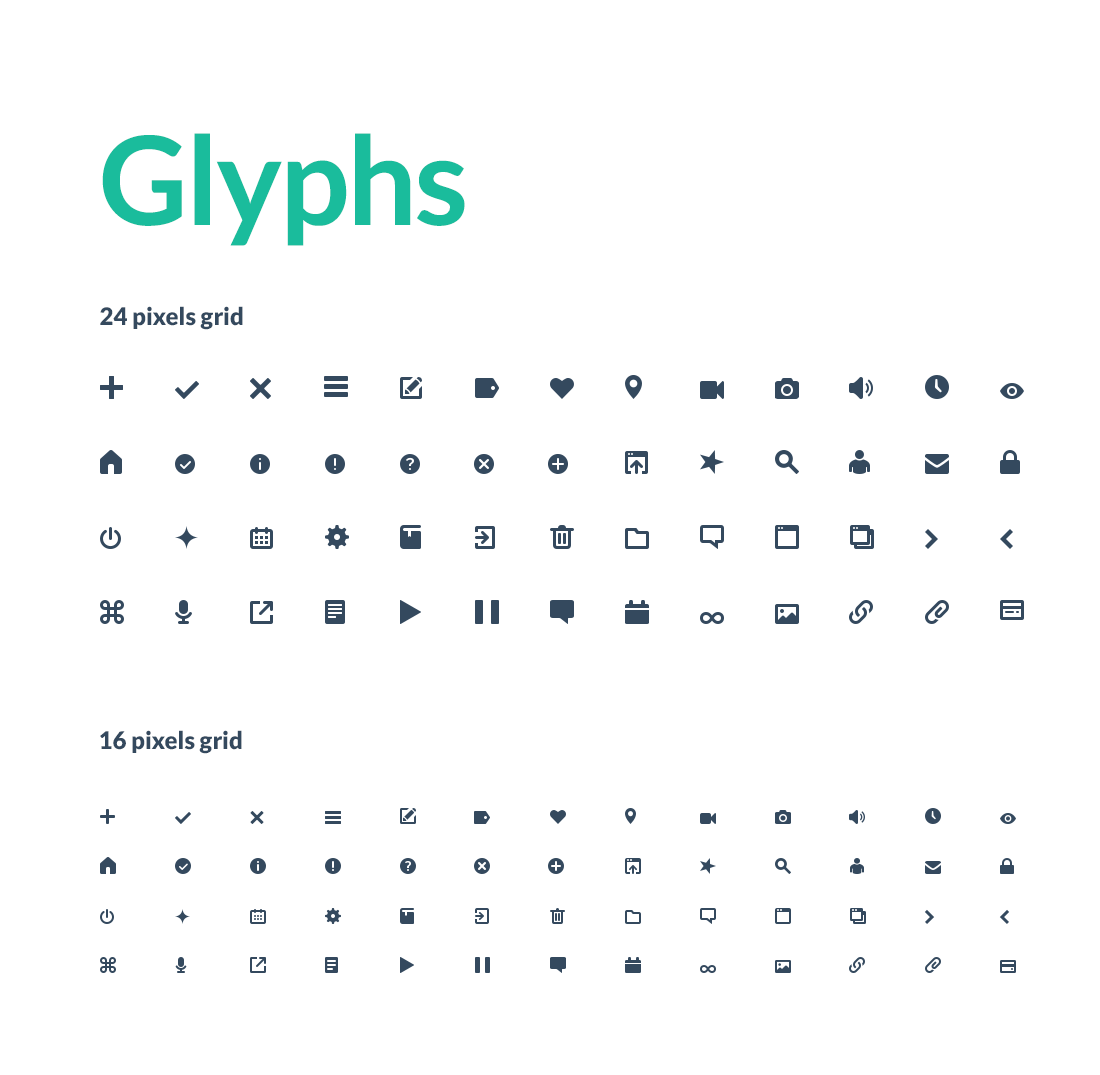
<style>
.page{position:relative;width:1100px;height:1075px;background:#ffffff}
.page>*{position:absolute;margin:0}
.t1{font:122.8px "Lato-Bold";letter-spacing:-0.02em;color:#1abc9c}
.t2{font:24px "Lato-Black";color:#34495e}
</style>
<div class="page">
<p class="t1" style="left:102px;top:133px;width:363px;height:113px">Glyphs</p>
<p class="t2" style="left:100px;top:306px;width:143px;height:24px">24 pixels grid</p>
<p class="t2" style="left:100px;top:730px;width:142px;height:24px">16 pixels grid</p>
</div>
